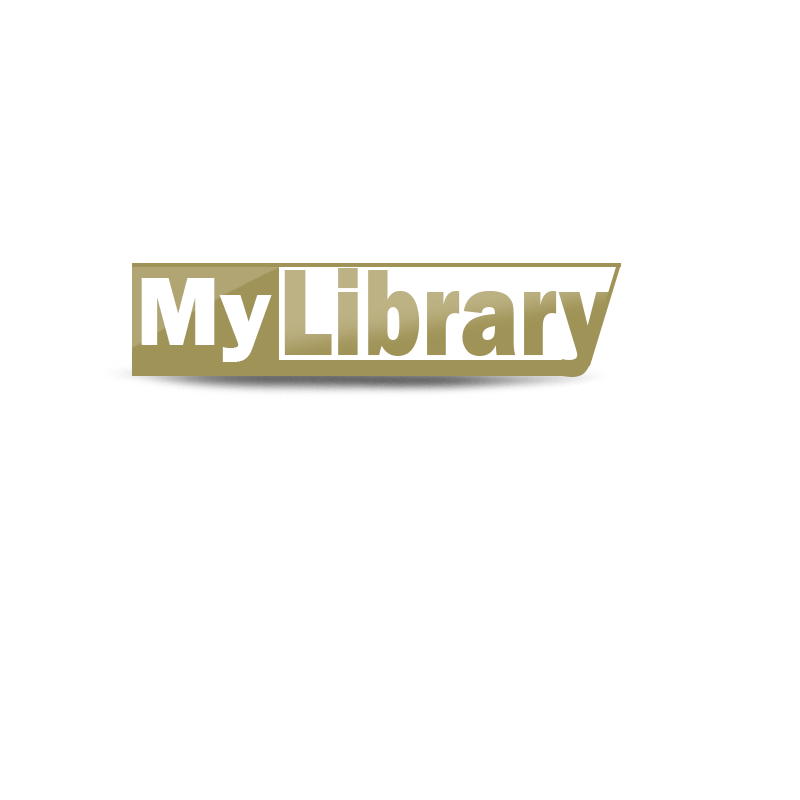
<style>
.page{position:relative;width:800px;height:800px;background:#ffffff}
.page>*{position:absolute;margin:0}
.t1{font:127.2px "FranklinGothic-Heavy";scale:0.79 1}
.t2{font:100px "FranklinGothic-Heavy";color:#ffffff}
</style>
<div class="page">
<p class="t1" style="left:284px;top:268px;width:327px;height:109px">Library</p>
<p class="t2" style="left:141px;top:278px;width:131px;height:84px">My</p>
</div>
